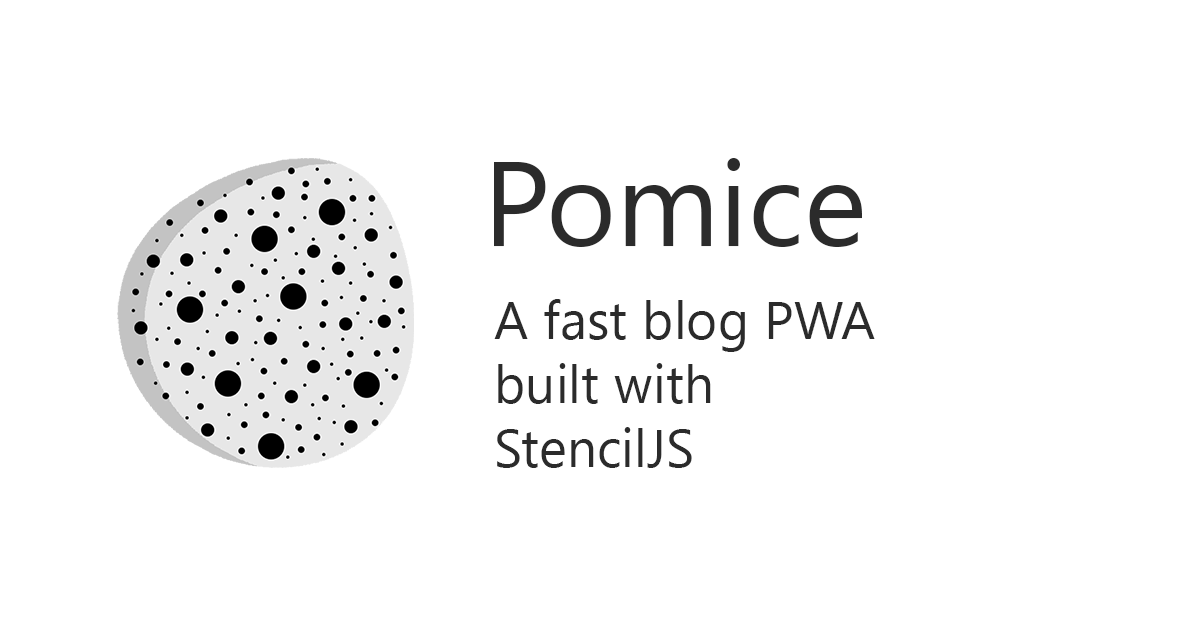
<style>
.page{position:relative;width:1200px;height:627px;background:#ffffff}
.page>*{position:absolute;margin:0}
.t1{font:120px "SegoeUI";color:#2b2b2b}
.t2{font:53.3px "SegoeUI";color:#2b2b2b}
</style>
<div class="page">
<p class="t1" style="left:494px;top:158px;width:368px;height:89px">Pomice</p>
<p class="t2" style="left:494px;top:299px;width:381px;height:169px">A fast blog PWA<br>built with<br>StencilJS</p>
</div>
